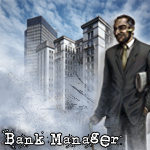
<style>
.page{position:relative;width:150px;height:150px}
.page>*{position:absolute;margin:0}
.t1{font:17px "junko-typewriter";color:#ffffff}
</style>
<div class="page">
<p class="t1" style="left:2px;top:129px;width:120px;height:20px">Bank Manager</p>
</div>
